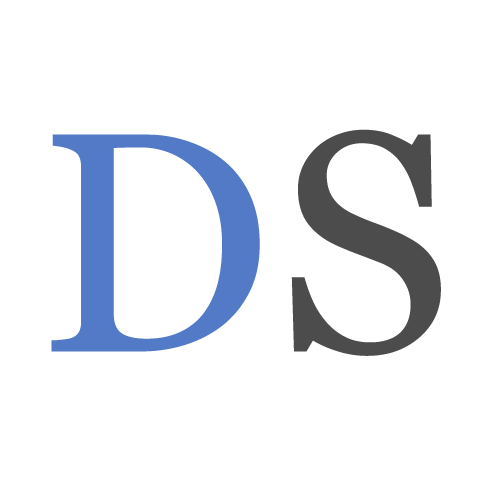
<style>
.page{position:relative;width:500px;height:500px;background:#ffffff}
.page>*{position:absolute;margin:0}
.t1{font:312.6px "Georgia";letter-spacing:0.02em;color:#527ac6}
.t2{font:312.6px "Georgia";letter-spacing:0.02em;color:#4c4c4c}
</style>
<div class="page">
<p class="t1" style="left:51px;top:129px;width:390px;height:227px">D<span class="t2">S</span></p>
</div>
